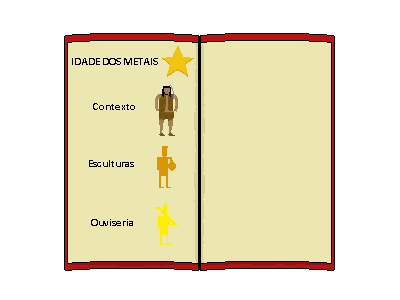
<style>
.page{position:relative;width:400px;height:300px;background:#ffffff}
.page>*{position:absolute;margin:0}
.t1{font:11px "Calibri-Bold";color:#010101}
.t2{font:11px "Calibri-Bold";color:#000000}
</style>
<div class="page">
<p class="t1" style="left:72px;top:58px;width:86px;height:7px">IDADE DOS METAIS</p>
<p class="t1" style="left:93px;top:103px;width:42px;height:7px">Contexto</p>
<p class="t1" style="left:89px;top:160px;width:45px;height:7px">Esculturas</p>
<p class="t2" style="left:91px;top:219px;width:42px;height:7px">Ouviseria</p>
</div>
